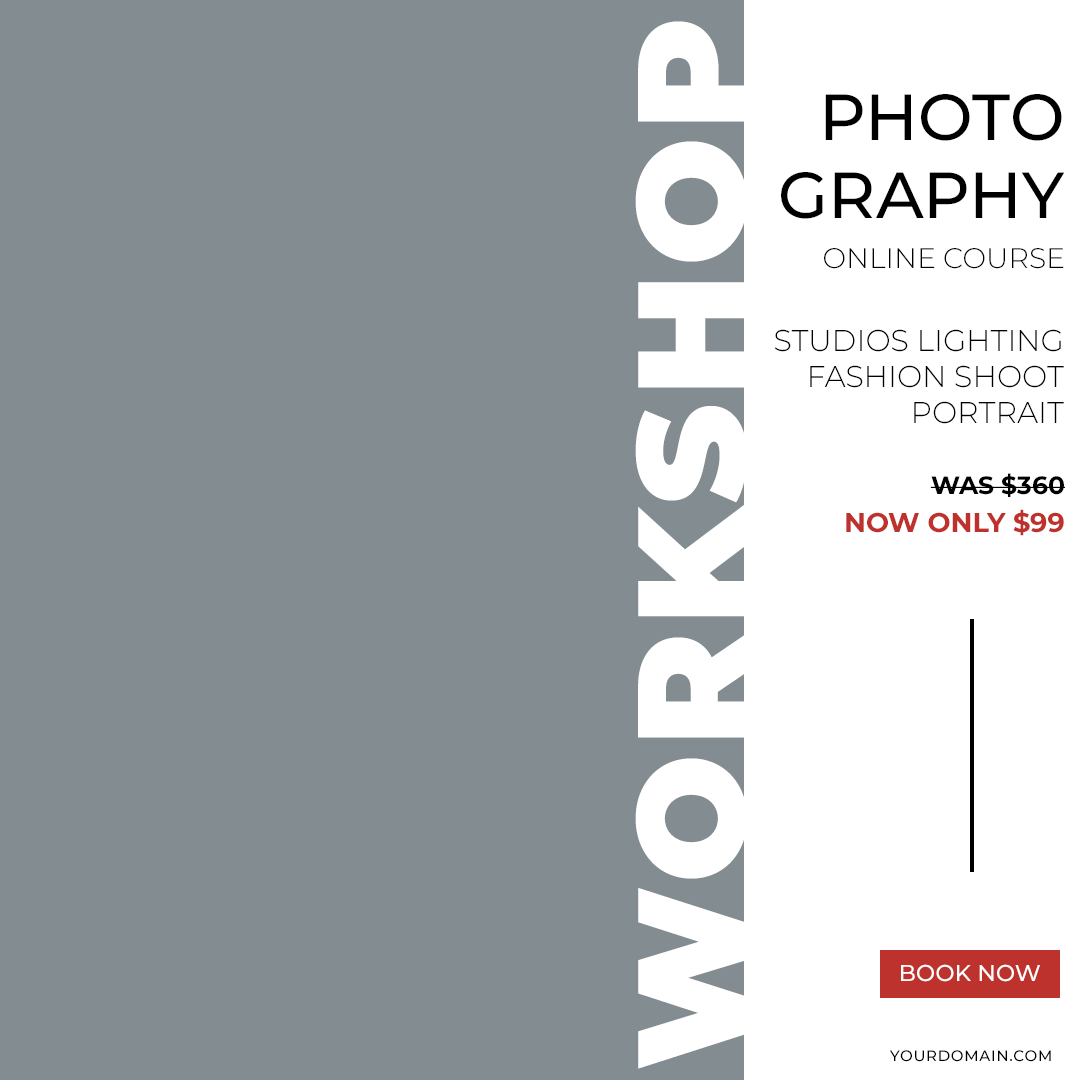
<style>
.page{position:relative;width:1080px;height:1080px;background:#838c91}
.page>*{position:absolute;margin:0}
.t1{font:151.8px "Montserrat-Black";letter-spacing:0.05em;color:#ffffff;text-transform:uppercase}
.t2{font:65px "Montserrat-Medium";color:#000000;text-transform:uppercase}
.t3{font:6.8px "Montserrat-Light";color:#000000;text-transform:uppercase}
.t4{font:30px "Montserrat-Light";color:#000000;text-transform:uppercase}
.t5{font:25px "Montserrat-Bold";color:#000000;text-transform:uppercase}
.t6{font:27.2px "Montserrat-Bold";color:#bd322d;text-transform:uppercase}
.t7{font:23px "Montserrat-Medium";color:#ffffff;text-transform:uppercase}
.t8{font:15px "Montserrat-Medium";letter-spacing:0.05em;color:#000000;text-transform:uppercase}
</style>
<div class="page">
<p class="t1" style="left:635px;top:21px;width:112px;height:1048px;rotate:-90deg">Workshop</p>
<p class="t2" style="left:781px;top:94px;width:284px;height:125px;text-align:right">Photo<br>Graphy</p>
<p class="t3" style="left:824px;top:248px;width:240px;height:21px;text-align:right">Online Course</p>
<p class="t4" style="left:775px;top:329px;width:289px;height:95px;text-align:right">Studios Lighting<br>Fashion Shoot<br>Portrait</p>
<p class="t5" style="left:930px;top:473px;width:135px;height:24px">Was $360</p>
<p class="t6" style="left:846px;top:509px;width:218px;height:27px">Now Only $99</p>
<p class="t7" style="left:901px;top:964px;width:139px;height:18px">Book Now</p>
<p class="t8" style="left:889px;top:1050px;width:162px;height:12px">Yourdomain.com</p>
</div>
